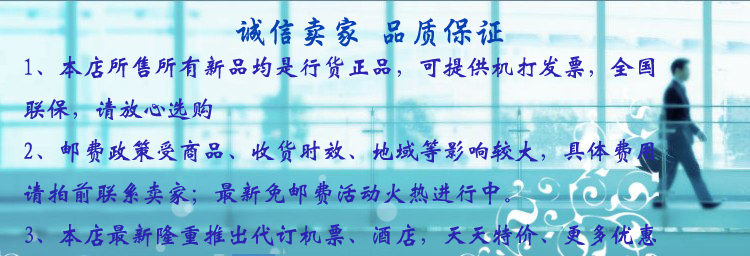
<style>
.page{position:relative;width:750px;height:256px}
.page>*{position:absolute;margin:0}
.t1{font:24px "-G-w-e-i-0-0-h";color:#2d23b2}
</style>
<div class="page">
<p class="t1" style="left:24px;top:55px;width:632px;height:192px">1、本店所售所有新品均是行货正品，可提供机打发票，全国联保，请放心选购<br>2、邮费政策受商品、收货时效、地域等影响较大，具体费用请拍前联系卖家；最新免邮费活动火热进行中。<br>3、本店最新隆重推出代订机票、酒店，天天特价、更多优惠，敬请联系卖家！</p>
</div>
